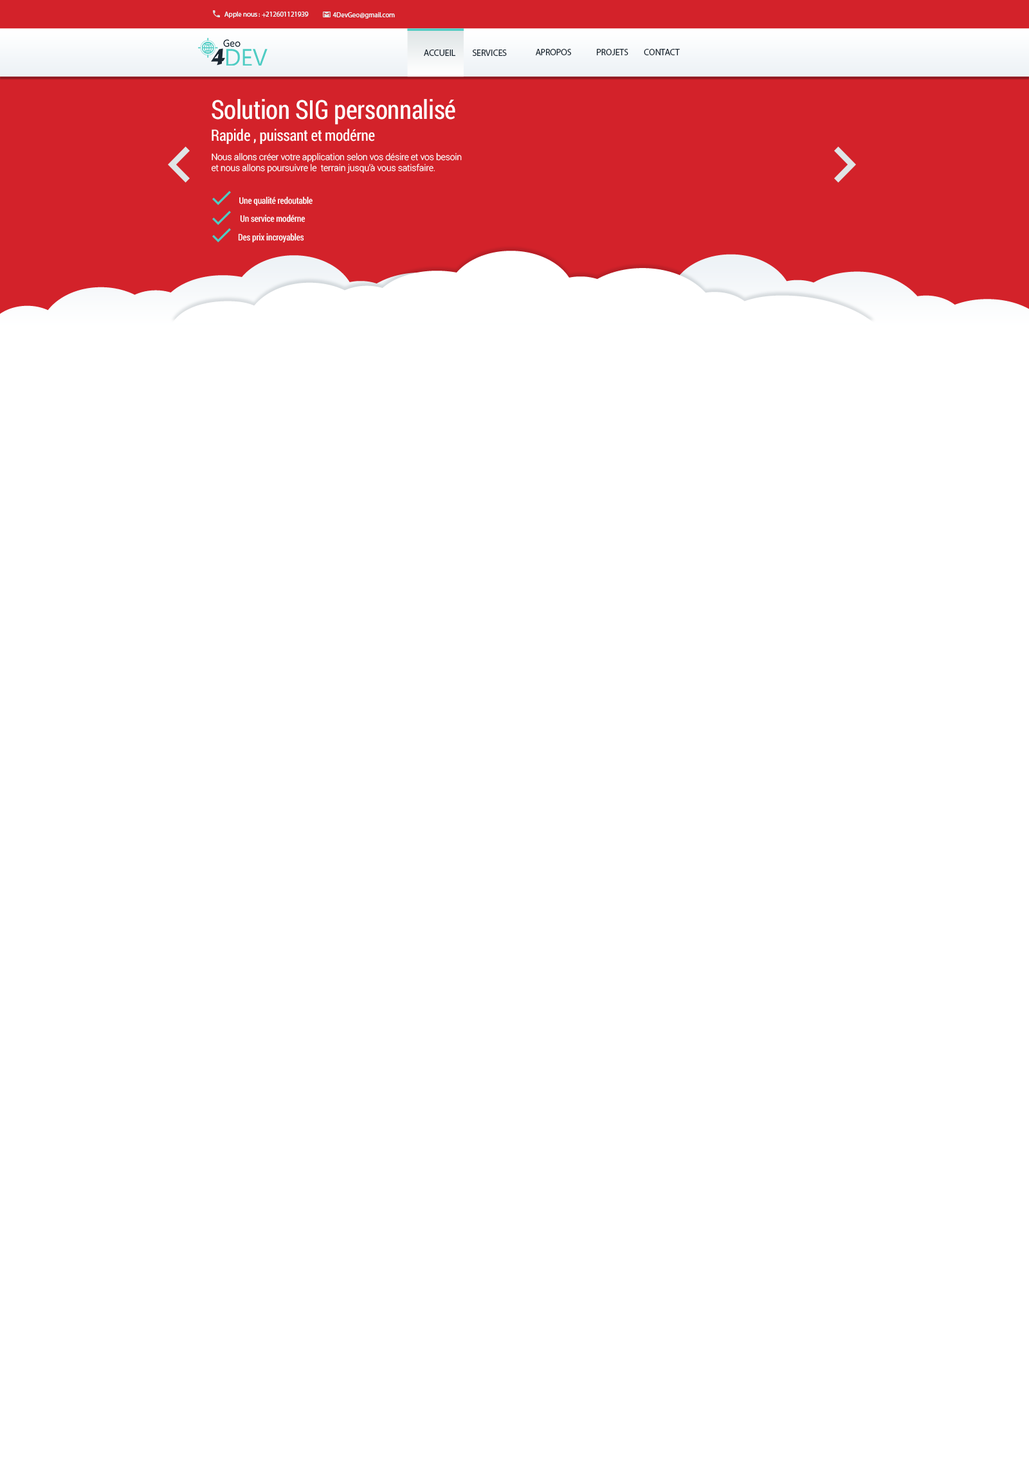
<style>
.page{position:relative;width:1029px;height:1472px;background:#ffffff}
.page>*{position:absolute;margin:0}
.t1{font:7.1px "MyriadPro-Regular";letter-spacing:-0.01em;color:#edf2f6}
.t2{font:9px "MyriadPro-Regular";letter-spacing:-0.01em;color:#1a2732}
.t3{font:26.2px "RobotoCondensed-Regular";letter-spacing:-0.01em;color:#ffffff}
.t4{font:15.6px "RobotoCondensed-Regular";letter-spacing:-0.01em;color:#ffffff}
.t5{font:9px "Roboto-Light";letter-spacing:-0.01em;color:#ffffff}
.t6{font:9px "RobotoCondensed-Regular";letter-spacing:-0.01em;color:#ffffff}
</style>
<div class="page">
<p class="t1" style="left:224px;top:12px;width:85px;height:6px">Apple nous : +212601121939</p>
<p class="t1" style="left:332px;top:12px;width:63px;height:7px">4DevGeo@gmail.com</p>
<p class="t2" style="left:424px;top:50px;width:31px;height:6px">ACCUEIL</p>
<p class="t2" style="left:472px;top:50px;width:35px;height:6px">SERVICES</p>
<p class="t2" style="left:536px;top:49px;width:35px;height:6px">APROPOS</p>
<p class="t2" style="left:597px;top:49px;width:31px;height:6px">PROJETS</p>
<p class="t2" style="left:644px;top:49px;width:36px;height:6px">CONTACT</p>
<p class="t3" style="left:212px;top:99px;width:243px;height:26px">Solution SIG personnalisé</p>
<p class="t4" style="left:212px;top:129px;width:163px;height:15px">Rapide , puissant et modérne</p>
<p class="t5" style="left:212px;top:153px;width:250px;height:21px">Nous allons créer votre application selon vos désire et vos besoin<br>et nous allons poursuivre le  terrain jusqu’à vous satisfaire.</p>
<p class="t6" style="left:239px;top:197px;width:73px;height:9px">Une qualité redoutable</p>
<p class="t6" style="left:240px;top:215px;width:65px;height:7px">Un service modérne</p>
<p class="t6" style="left:238px;top:233px;width:66px;height:9px">Des prix incroyables</p>
</div>
